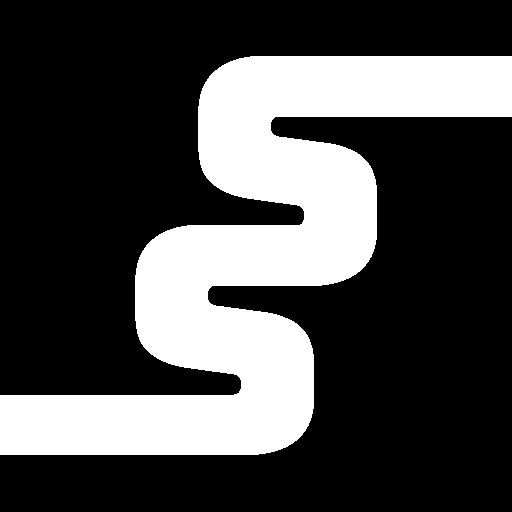
<style>
.page{position:relative;width:512px;height:512px;background:#000000}
.page>*{position:absolute;margin:0}
.t1{font:320px "Bungee-Regular";letter-spacing:-0.1em;color:#ffffff}
</style>
<div class="page">
<p class="t1" style="left:198px;top:56px;width:179px;height:230px">S</p>
<p class="t1" style="left:135px;top:225px;width:179px;height:230px">S</p>
</div>
